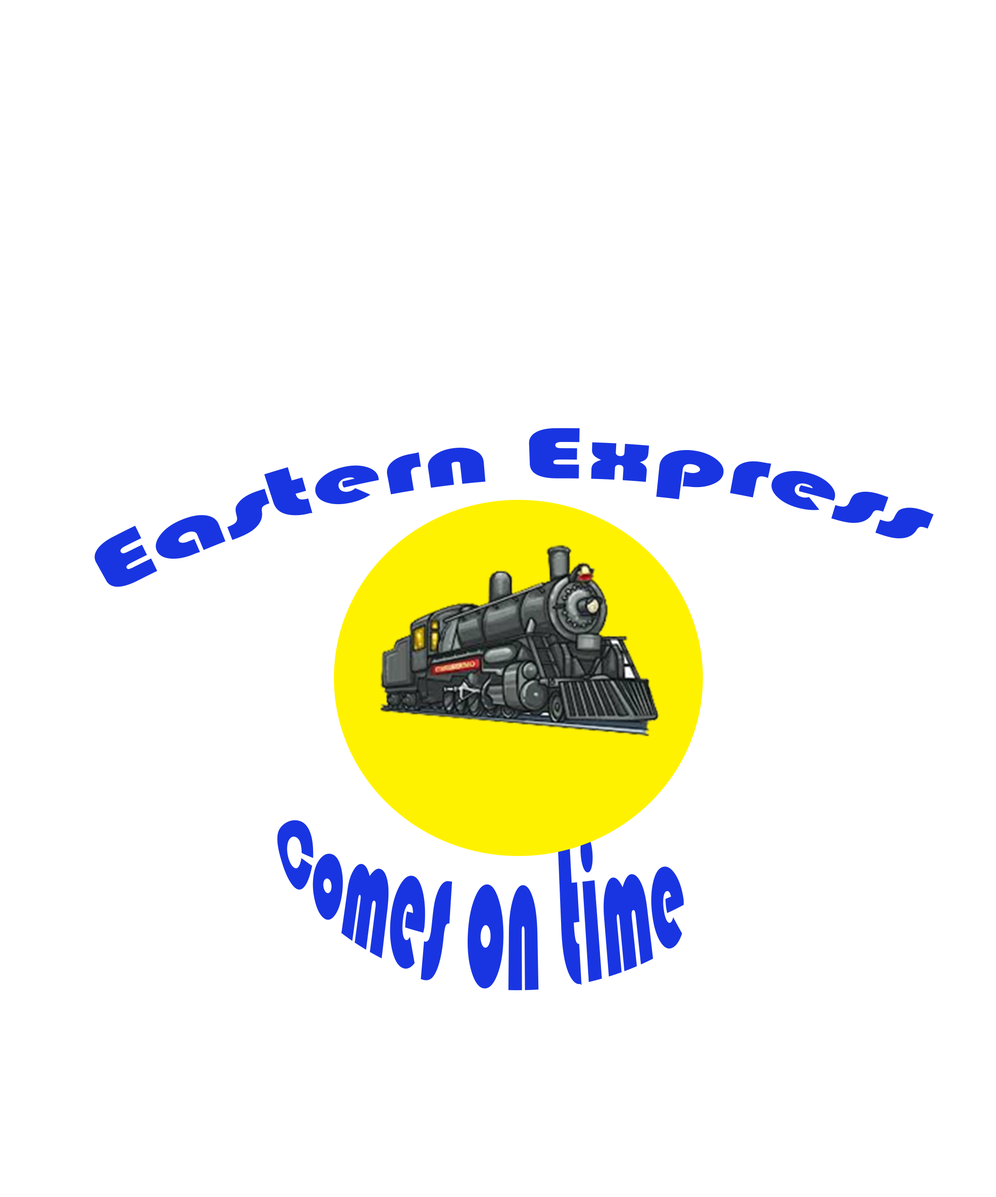
<style>
.page{position:relative;width:996px;height:1197px;background:#ffffff}
.page>*{position:absolute;margin:0}
.t1{font:75.2px "Bauhaus93";color:#1935e1}
.t2{font:60.2px "Bauhaus93";color:#1935e1}
</style>
<div class="page">
<p class="t1" style="left:94px;top:428px;width:840px;height:159px">Eastern Express</p>
<p class="t2" style="left:277px;top:820px;width:407px;height:170px">Comes on time</p>
</div>
